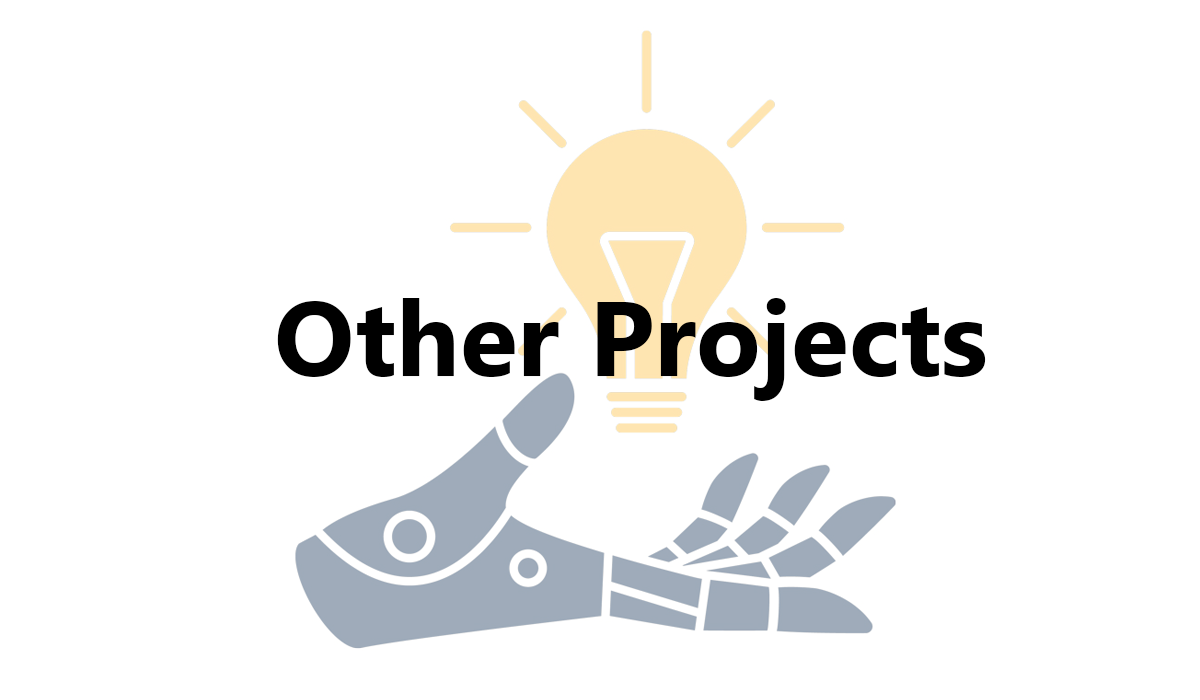
<style>
.page{position:relative;width:1200px;height:700px;background:#ffffff}
.page>*{position:absolute;margin:0}
.t1{font:106.1px "MicrosoftTaiLe-Bold";color:#000000}
</style>
<div class="page">
<p class="t1" style="left:277px;top:298px;width:709px;height:103px">Other Projects</p>
</div>
